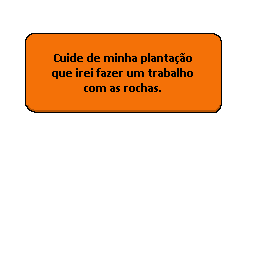
<style>
.page{position:relative;width:256px;height:256px;background:#ffffff}
.page>*{position:absolute;margin:0}
.t1{font:12.5px "Calibri-Bold";color:#000000}
</style>
<div class="page">
<p class="t1" style="left:52px;top:53px;width:141px;height:39px;text-align:center">Cuide de minha plantação que irei fazer um trabalho com as rochas.</p>
</div>
